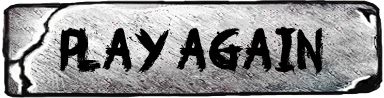
<style>
.page{position:relative;width:384px;height:98px}
.page>*{position:absolute;margin:0}
.t1{font:55px "OhNo";color:#010101}
</style>
<div class="page">
<p class="t1" style="left:51px;top:23px;width:278px;height:54px">PLAY AGAIN</p>
</div>
